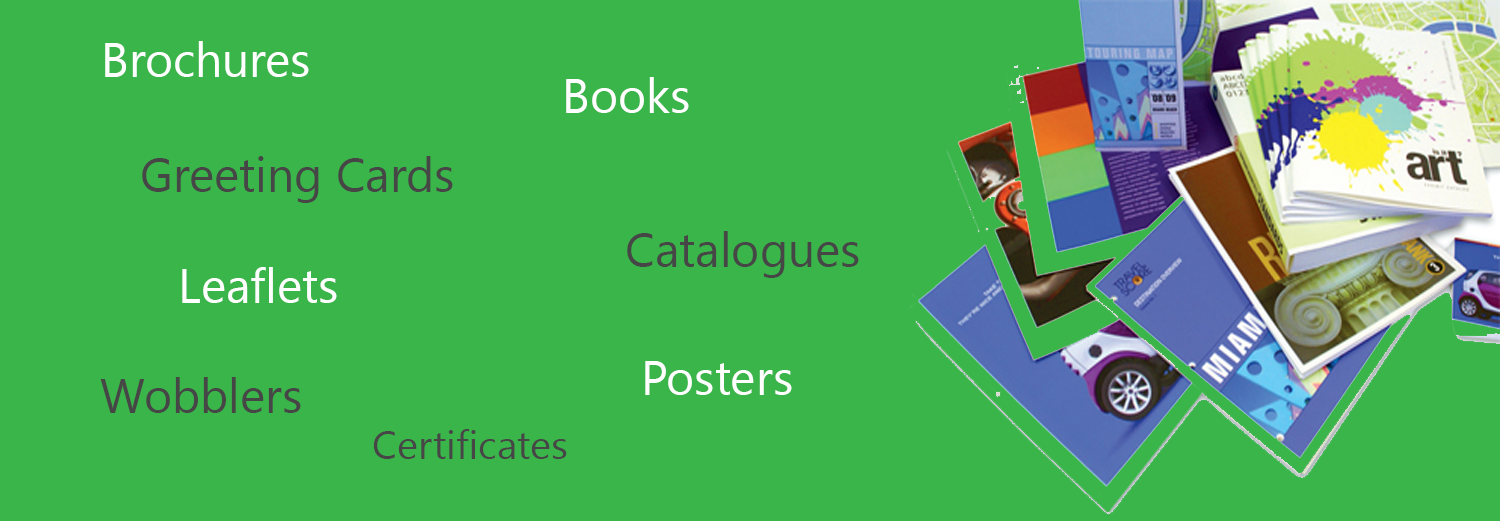
<style>
.page{position:relative;width:1500px;height:521px;background:#39b54a}
.page>*{position:absolute;margin:0}
.t1{font:48px "SegoeUI";color:#ffffff}
.t2{font:48px "SegoeUI";color:#464646}
.t3{font:40px "SegoeUI";color:#464646}
</style>
<div class="page">
<p class="t1" style="left:105px;top:41px;width:204px;height:36px">Brochures</p>
<p class="t1" style="left:566px;top:77px;width:123px;height:36px">Books</p>
<p class="t2" style="left:142px;top:156px;width:311px;height:47px">Greeting Cards</p>
<p class="t2" style="left:627px;top:231px;width:232px;height:47px">Catalogues</p>
<p class="t1" style="left:182px;top:267px;width:155px;height:36px">Leaflets</p>
<p class="t1" style="left:645px;top:361px;width:147px;height:34px">Posters</p>
<p class="t2" style="left:100px;top:377px;width:201px;height:36px">Wobblers</p>
<p class="t3" style="left:373px;top:429px;width:194px;height:30px">Certificates</p>
</div>
